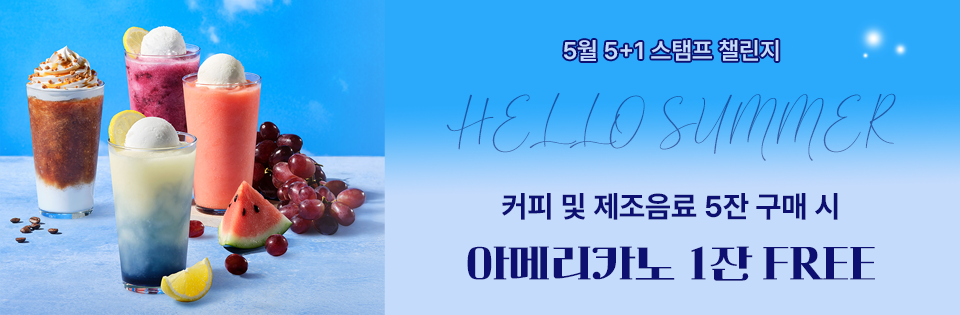
<style>
.page{position:relative;width:960px;height:315px}
.page>*{position:absolute;margin:0}
.t1{font:24px "Pretendard-SemiBold";color:#c4dbfc}
.t2{font:72px "Cherolina";color:#2459a7}
.t3{font:30px/60px "Pretendard-Bold";color:#0d0f71}
.t4{font:42px/60px "Cafe24ClassicType-Regular";color:#0d0f71}
</style>
<div class="page">
<p class="t1" style="left:564px;top:40px;width:215px;height:21px">5월 5+1 스탬프 챌린지</p>
<p class="t2" style="left:446px;top:93px;width:450px;height:68px">HELLO SUMMER</p>
<p class="t3" style="left:467px;top:193px;width:408px;height:88px;text-align:center">커피 및 제조음료 5잔 구매 시<br><span class="t4">아메리카노 1잔 FREE</span></p>
</div>
